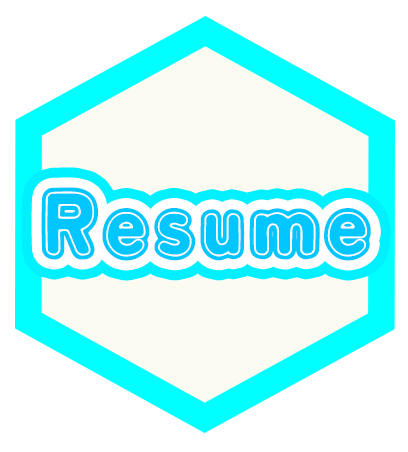
<style>
.page{position:relative;width:408px;height:452px;background:#ffffff}
.page>*{position:absolute;margin:0}
.t1{font:100px "DokiDokiFantasia";color:#01c6ff}
</style>
<div class="page">
<p class="t1" style="left:41px;top:187px;width:330px;height:74px">Resume</p>
</div>
